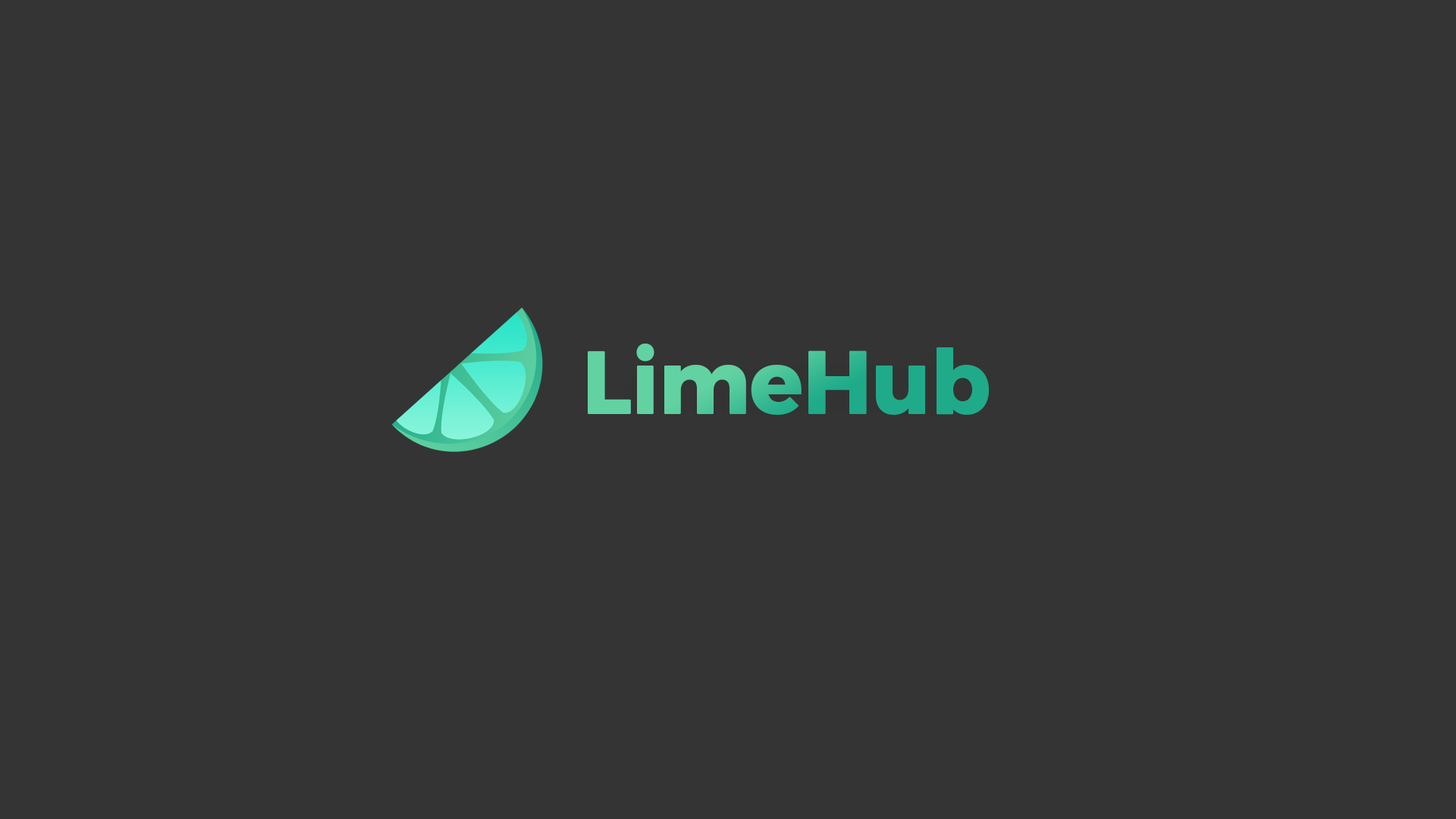
<style>
.page{position:relative;width:1456px;height:819px;background:#343434}
.page>*{position:absolute;margin:0}
.t1{font:87.6px "TruenoBd";letter-spacing:-0.025em;font-weight:bold}
</style>
<div class="page">
<p class="t1" style="left:588px;top:344px;width:401px;height:71px">LimeHub</p>
</div>
